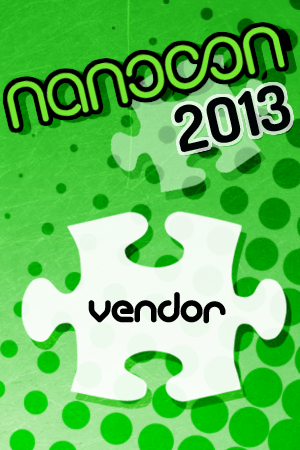
<style>
.page{position:relative;width:300px;height:450px}
.page>*{position:absolute;margin:0}
.t1{font:62.5px "Dosis-Bold";color:#000405}
.t2{font:41.7px "gitchgitch";color:#000000}
</style>
<div class="page">
<p class="t1" style="left:174px;top:85px;width:117px;height:67px;rotate:-13deg">2O13</p>
<p class="t2" style="left:88px;top:292px;width:138px;height:32px">vendor</p>
</div>
